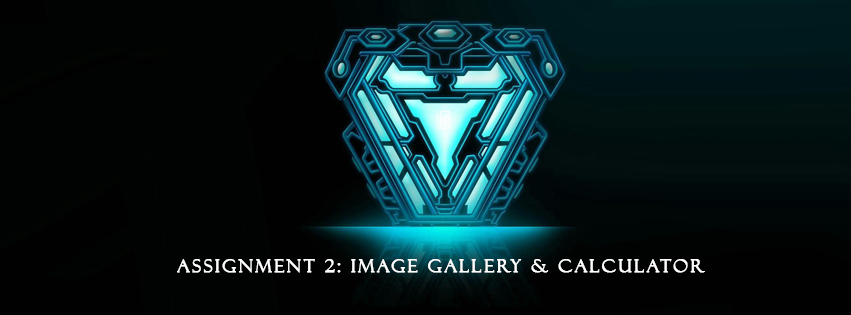
<style>
.page{position:relative;width:851px;height:315px;background:#010302}
.page>*{position:absolute;margin:0}
.t1{font:18px "FelixTitlingMT";letter-spacing:0.12em;color:#ffffff;font-weight:bold}
</style>
<div class="page">
<p class="t1" style="left:177px;top:259px;width:528px;height:14px">Assignment 2: Image Gallery &amp; Calculator</p>
</div>
